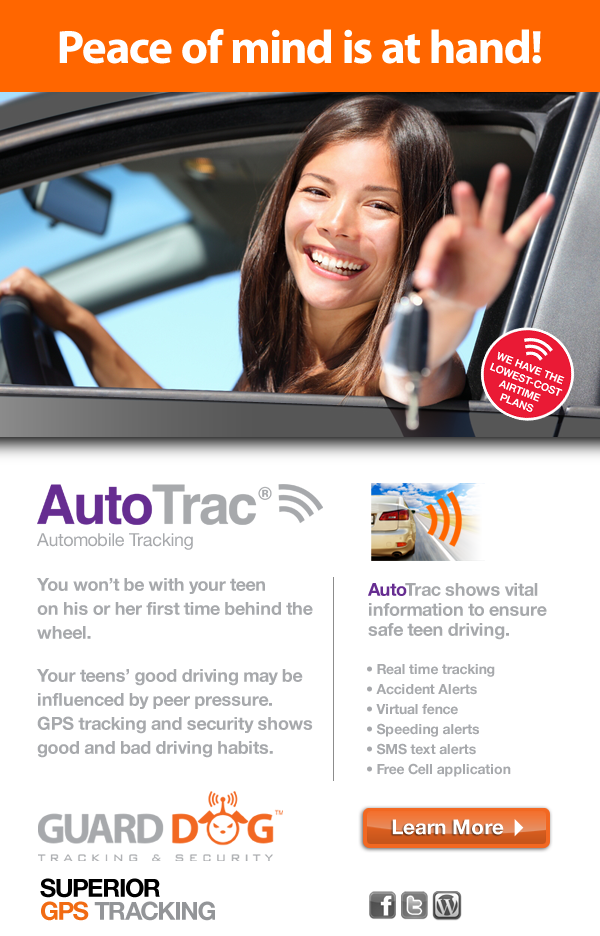
<style>
.page{position:relative;width:600px;height:936px;background:#ffffff}
.page>*{position:absolute;margin:0}
.t1{font:47.3px "MyriadPro-Bold";letter-spacing:-0.02em;color:#ffffff}
.t2{font:18px "HelveticaNeue";letter-spacing:-0.02em;color:#a7a9ac}
.t3{font:18px/24px "HelveticaNeue-Bold";letter-spacing:-0.02em;color:#a7a9ac}
.t4{font:18px/20px "HelveticaNeue-Bold";letter-spacing:-0.02em;color:#a7a9ac}
.t5{font:18px/20px "HelveticaNeue-Bold";letter-spacing:-0.02em;color:#662d91}
.t6{font:14px/20px "HelveticaNeue-Bold";letter-spacing:-0.02em;color:#a7a9ac}
.t7{font:20.6px "HelveticaNeue-Bold";color:#ffffff}
.t8{font:24.9px/23px "HelveticaNeue-Bold";letter-spacing:-0.04em;color:#000000}
.t9{font:24.9px/23px "HelveticaNeue-Bold";letter-spacing:-0.04em;color:#f16b13}
.t10{font:24.9px/23px "HelveticaNeue-Bold";letter-spacing:-0.04em;color:#939598}
</style>
<div class="page">
<p class="t1" style="left:59px;top:29px;width:482px;height:35px">Peace of mind is at hand!</p>
<p class="t2" style="left:37px;top:533px;width:156px;height:17px">Automobile Tracking</p>
<p class="t3" style="left:36px;top:578px;width:277px;height:61px">You won’t be with your teen <br>on his or her first time behind the wheel.</p>
<p class="t4" style="left:368px;top:583px;width:179px;height:57px"><span class="t5">Auto</span>Trac shows vital <br>information to ensure <br>safe teen driving.</p>
<p class="t6" style="left:367px;top:664px;width:144px;height:113px">• Real time tracking<br>• Accident Alerts<br>• Virtual fence<br>• Speeding alerts<br>• SMS text alerts<br>• Free Cell application</p>
<p class="t3" style="left:36px;top:669px;width:277px;height:89px">Your teens’ good driving may be <br>influenced by peer pressure.<br>GPS tracking and security shows <br>good and bad driving habits.</p>
<p class="t7" style="left:392px;top:819px;width:112px;height:16px">Learn More</p>
<p class="t8" style="left:40px;top:878px;width:175px;height:43px">SUPERIOR<br><span class="t9">GPS </span><span class="t10">TRACKING</span></p>
</div>
